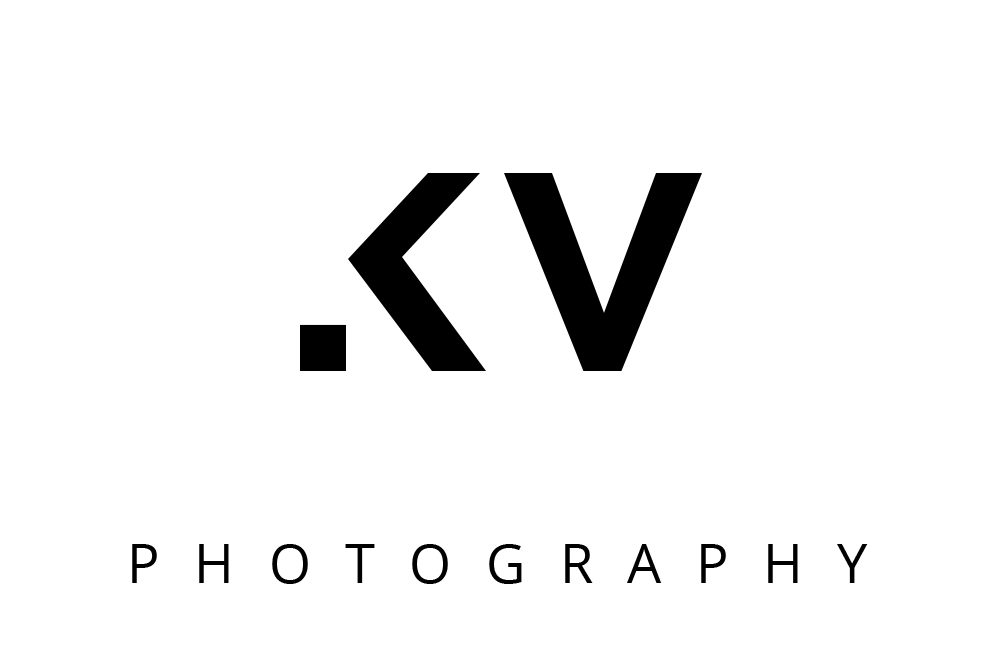
<style>
.page{position:relative;width:1000px;height:660px;background:#ffffff}
.page>*{position:absolute;margin:0}
.t1{font:54.1px "OpenSans";letter-spacing:0.635em;color:#000000}
</style>
<div class="page">
<p class="t1" style="left:132px;top:544px;width:736px;height:40px">PHOTOGRAPHY</p>
</div>
